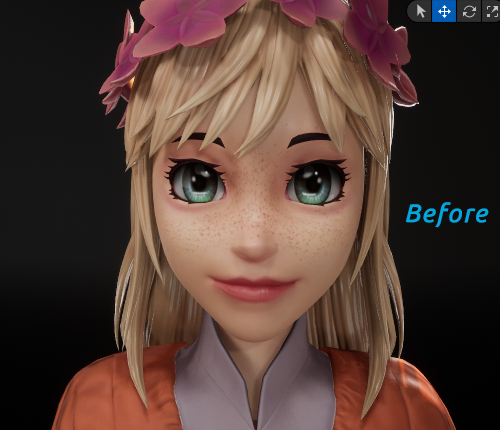
<style>
.page{position:relative;width:500px;height:430px}
.page>*{position:absolute;margin:0}
.t1{font:25.8px "Ubuntu-Italic";letter-spacing:0.03em;color:#03a7dd;font-weight:bold}
</style>
<div class="page">
<p class="t1" style="left:406px;top:202px;width:83px;height:26px">Before</p>
</div>
